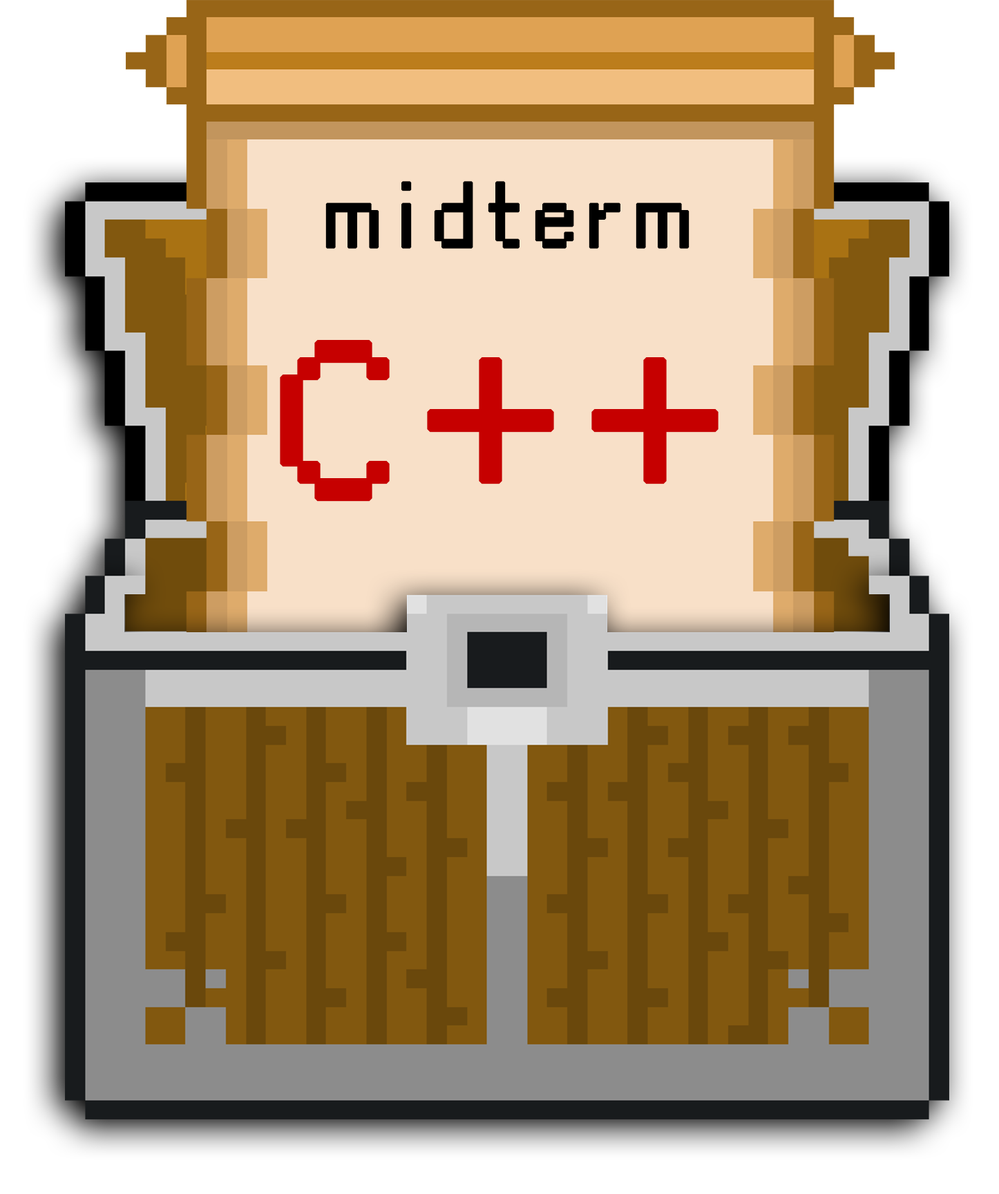
<style>
.page{position:relative;width:999px;height:1194px}
.page>*{position:absolute;margin:0}
.t1{font:86.4px "Cubic_11";letter-spacing:0.1em;color:#000000;font-weight:bold}
.t2{font:207.2px "Cubic_11";letter-spacing:0.1em;color:#c60000;font-weight:bold}
</style>
<div class="page">
<p class="t1" style="left:325px;top:181px;width:364px;height:68px">midterm</p>
<p class="t2" style="left:280px;top:340px;width:438px;height:162px">C++</p>
</div>
